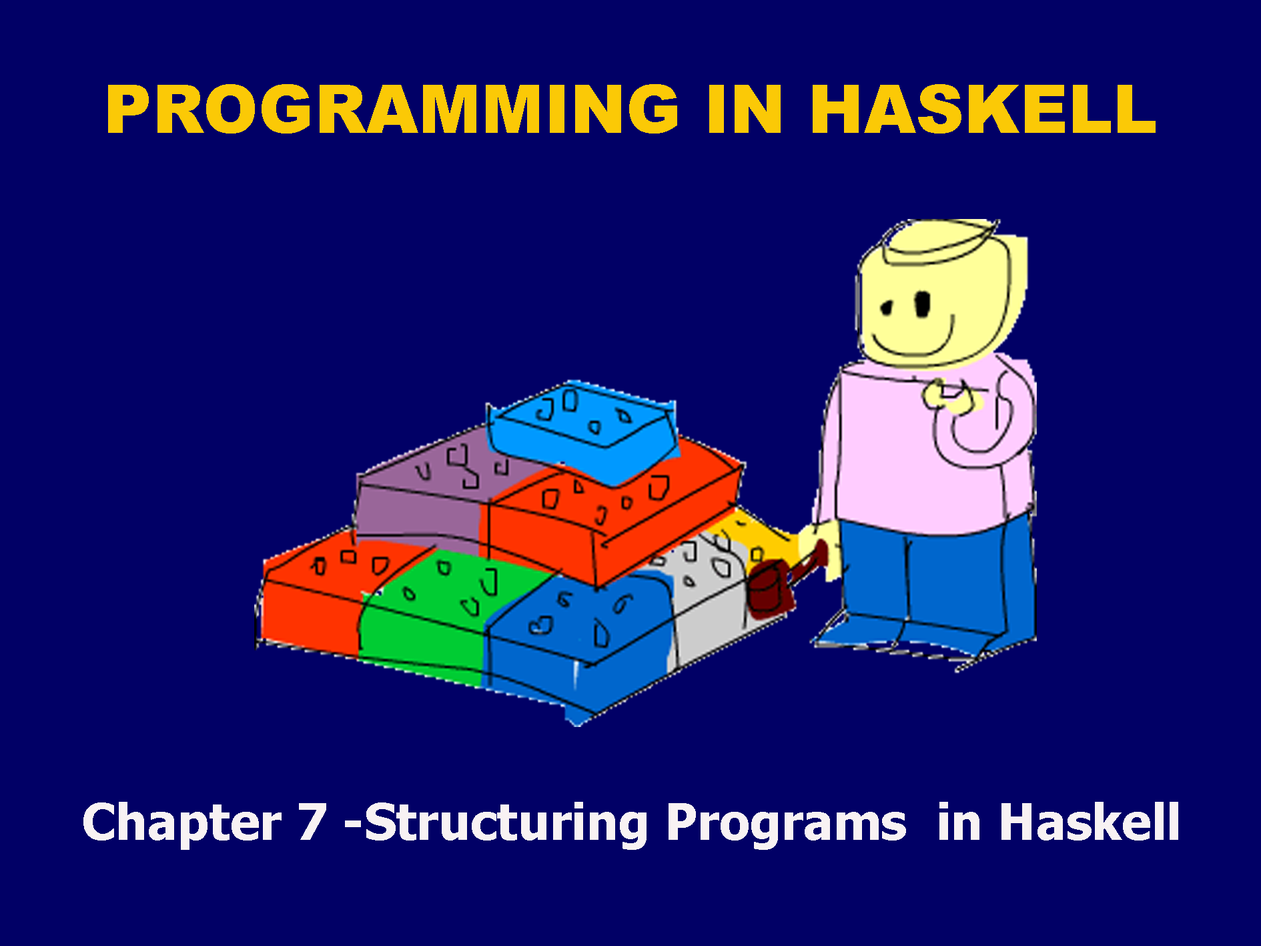
<style>
.page{position:relative;width:1261px;height:946px;background:#010066}
.page>*{position:absolute;margin:0}
.t1{font:66.9px "Arial-Black";color:#fbc906}
.t2{font:50px "Tahoma-Bold";color:#f8f2f3}
</style>
<div class="page">
<p class="t1" style="left:108px;top:84px;width:1048px;height:49px">PROGRAMMING IN HASKELL</p>
<p class="t2" style="left:83px;top:801px;width:1095px;height:48px">Chapter 7 -Structuring Programs  in Haskell</p>
</div>
